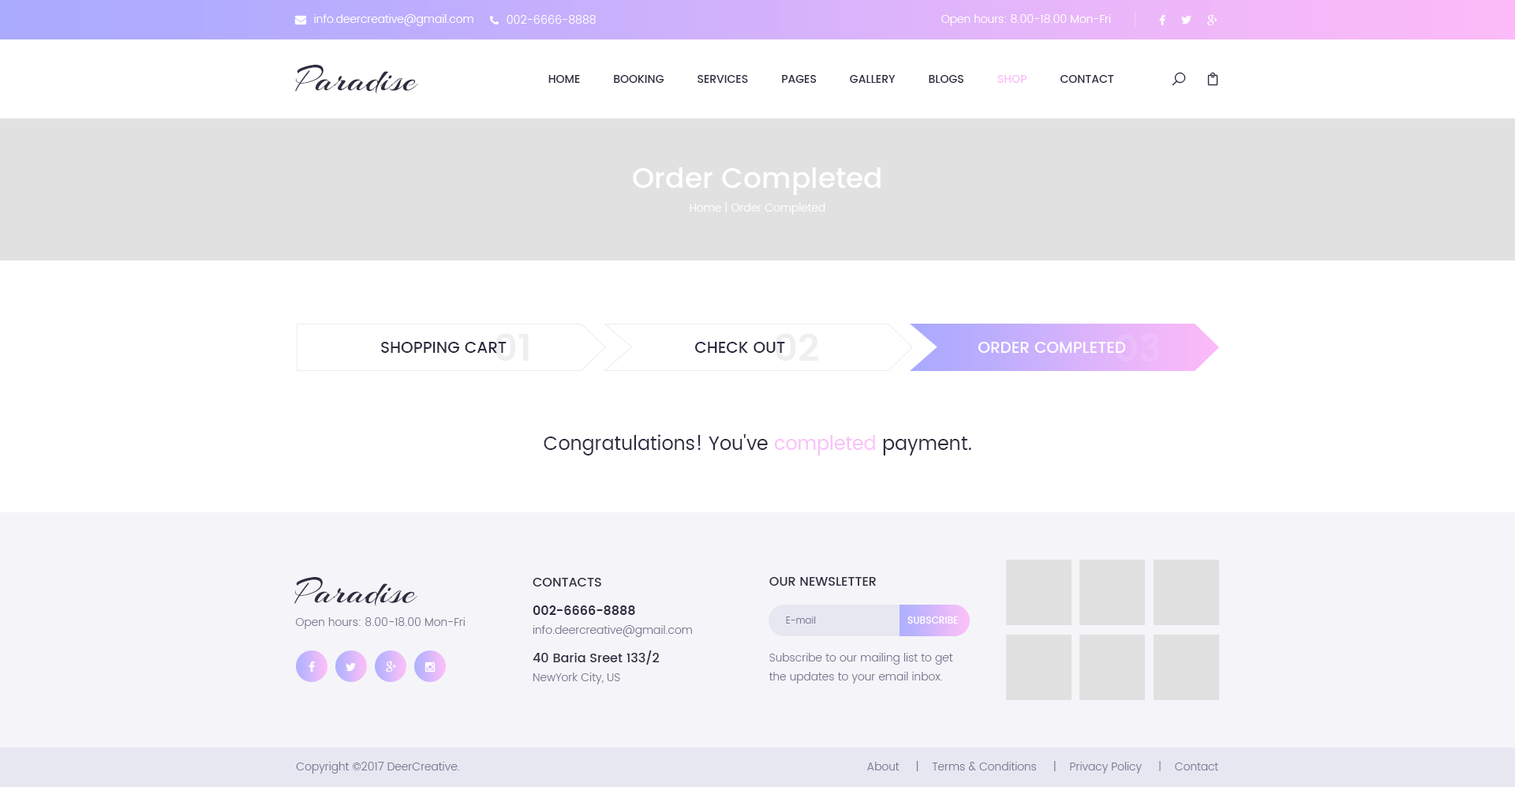
<style>
.page{position:relative;width:1515px;height:787px;background:#ffffff}
.page>*{position:absolute;margin:0}
.t1{font:11px "Poppins-Light";color:#ffffff}
.t2{font:37.9px "Arizonia-Regular";color:#2d2c40}
.t3{font:11px "Poppins-Medium";color:#2d2c40;text-transform:uppercase}
.t4{font:11px "Poppins-Medium";color:#fac0f9;text-transform:uppercase}
.t5{font:11px/23.7px "Poppins-Light";color:#ffffff}
.t6{font:28.4px/23.7px "Poppins-Medium";color:#ffffff}
.t7{font:15.8px "Poppins-Medium";color:#2d2c40;text-transform:uppercase}
.t8{font:15.8px "Poppins-Medium";color:#ffffff;text-transform:uppercase}
.t9{font:18.9px "Poppins-Regular";color:#2d2c40}
.t10{font:18.9px "Poppins-Regular";color:#fac0f9}
.t11{font:11px/18.9px "Poppins-Light";color:#7a7992}
.t12{font:12.6px/28.4px "Poppins-Medium";color:#2d2c40;text-transform:uppercase}
.t13{font:12.6px/28.4px "Poppins-SemiBold";color:#2d2c40}
.t14{font:12.6px/28.4px "Poppins-Medium";color:#2d2c40}
.t15{font:12.6px "Poppins-Medium";color:#2d2c40;text-transform:uppercase}
.t16{font:11px "Poppins-Light";color:#7a7992}
.t17{font:9.5px "Poppins-Light";color:#7a7992}
.t18{font:9.5px "Poppins-Medium";color:#ffffff;text-transform:uppercase}
</style>
<div class="page">
<p class="t1" style="left:314px;top:14px;width:160px;height:12px">info.deercreative@gmail.com</p>
<p class="t1" style="left:507px;top:15px;width:89px;height:9px">002-6666-8888</p>
<p class="t1" style="left:942px;top:14px;width:169px;height:12px">Open hours: 8.00-18.00 Mon-Fri</p>
<p class="t2" style="left:295px;top:65px;width:123px;height:29px">Paradise</p>
<p class="t3" style="left:549px;top:75px;width:565px;height:8px">Home          Booking          Services          Pages          Gallery          Blogs      <span class="t4">    Shop          </span>Contact</p>
<p class="t5" style="left:633px;top:167px;width:248px;height:48px;text-align:center"><span class="t6">Order Completed<br></span>Home | Order Completed</p>
<p class="t7" style="left:381px;top:342px;width:126px;height:11px">Shopping Cart</p>
<p class="t7" style="left:695px;top:342px;width:90px;height:11px">Check Out</p>
<p class="t8" style="left:979px;top:342px;width:147px;height:11px">Order Completed</p>
<p class="t9" style="left:544px;top:434px;width:428px;height:21px">Congratulations! You've <span class="t10">completed</span> payment.</p>
<p class="t2" style="left:294px;top:577px;width:124px;height:29px">Paradise</p>
<p class="t11" style="left:533px;top:578px;width:159px;height:106px"><span class="t12">Contacts<br></span><span class="t13">002-6666-8888<br></span>info.deercreative@gmail.com<br><span class="t14">40 Baria Sreet 133/2<br></span>NewYork City, US</p>
<p class="t15" style="left:770px;top:577px;width:106px;height:9px">Our Newsletter</p>
<p class="t16" style="left:295px;top:617px;width:171px;height:12px">Open hours: 8.00-18.00 Mon-Fri</p>
<p class="t17" style="left:786px;top:616px;width:30px;height:8px">E-mail</p>
<p class="t18" style="left:908px;top:616px;width:50px;height:8px">Subscribe</p>
<p class="t11" style="left:769px;top:653px;width:184px;height:30px">Subscribe to our mailing list to get the updates to your email inbox.</p>
<p class="t16" style="left:296px;top:762px;width:164px;height:11px">Copyright ©2017 DeerCreative.</p>
<p class="t16" style="left:867px;top:761px;width:352px;height:12px">About     |    Terms &amp; Conditions     |    Privacy Policy     |    Contact</p>
</div>
